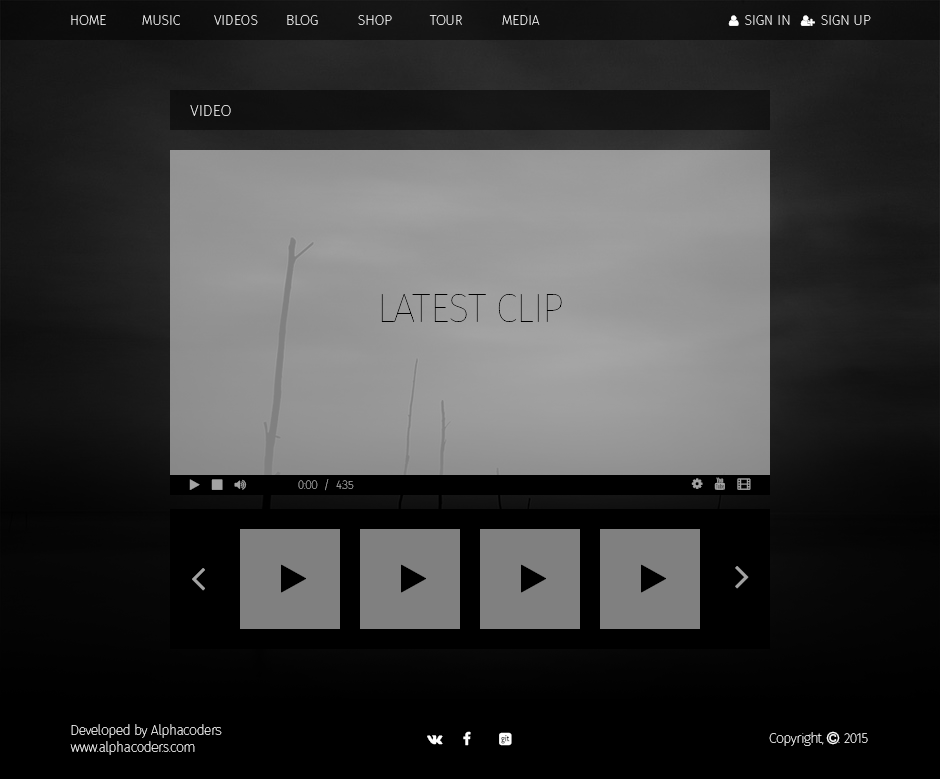
<style>
.page{position:relative;width:940px;height:779px}
.page>*{position:absolute;margin:0}
.t1{font:14px "FiraSans-Eight";color:#ffffff}
.t2{font:16px "FiraSans-Eight"}
.t3{font:40px "FiraSans-Eight";letter-spacing:-0.035em;color:#000000}
.t4{font:14px "FiraSans-Eight";letter-spacing:-0.035em;color:#ffffff}
</style>
<div class="page">
<p class="t1" style="left:71px;top:15px;width:469px;height:10px">HOME MUSIC VIDEOS BLOG  SHOP  TOUR  MEDIA</p>
<p class="t2" style="left:190px;top:105px;width:41px;height:11px">VIDEO</p>
<p class="t3" style="left:381px;top:294px;width:181px;height:28px">LATEST CLIP</p>
<p class="t4" style="left:70px;top:724px;width:152px;height:31px">Developed by Alphacoders<br>www.alphacoder.s.com</p>
</div>
